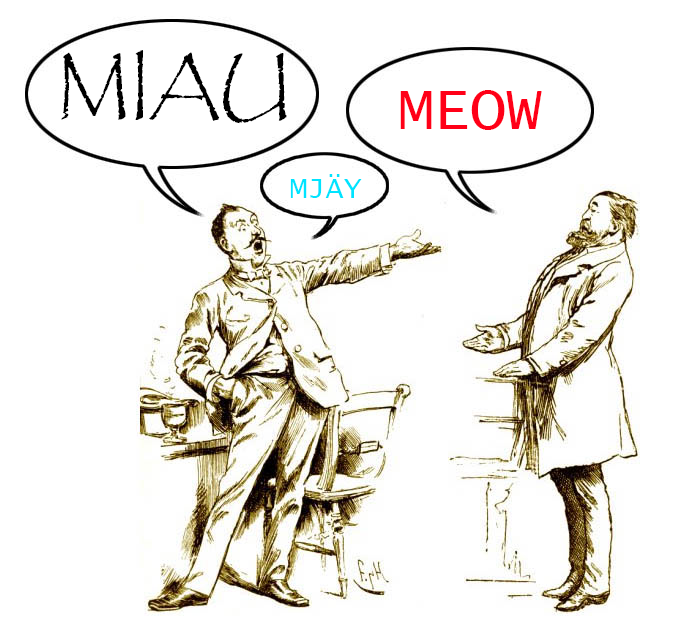
<style>
.page{position:relative;width:675px;height:636px;background:#ffffff}
.page>*{position:absolute;margin:0}
.t1{font:72px "Papyrus-Regular";color:#000000}
.t2{font:60px "LucidaConsole";color:#ff0018}
.t3{font:30px "LucidaConsole";color:#00e4ff}
</style>
<div class="page">
<p class="t1" style="left:61px;top:50px;width:226px;height:74px">MIAU</p>
<p class="t2" style="left:400px;top:90px;width:142px;height:40px">MEOW</p>
<p class="t3" style="left:290px;top:174px;width:72px;height:24px">MJÄY</p>
</div>
